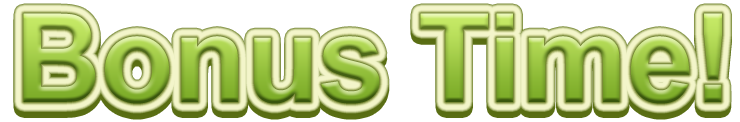
<style>
.page{position:relative;width:740px;height:122px;background:#ffffff}
.page>*{position:absolute;margin:0}
.t1{font:123.2px "Arial-BoldMT";scale:0.97 1}
</style>
<div class="page">
<p class="t1" style="left:23px;top:13px;width:699px;height:91px">Bonus Time!</p>
<p class="t1" style="left:23px;top:19px;width:699px;height:91px">Bonus Time!</p>
</div>
